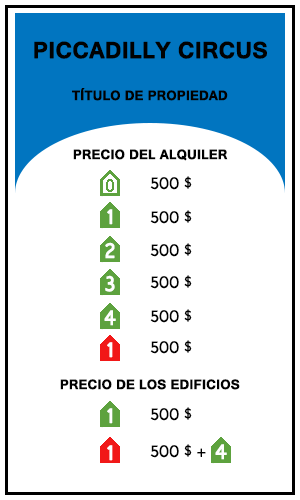
<style>
.page{position:relative;width:300px;height:500px;background:#ffffff}
.page>*{position:absolute;margin:0}
.t1{font:24px "Gautami-Bold";color:#010101;font-weight:bold}
.t2{font:14px "Gautami-Bold";color:#010101;font-weight:bold}
.t3{font:14px "KabelBook";color:#000000;font-weight:bold}
.t4{font:22px "Gautami";color:#fefefe;font-weight:bold}
</style>
<div class="page">
<p class="t1" style="left:34px;top:41px;width:233px;height:18px">PICCADILLY CIRCUS</p>
<p class="t2" style="left:72px;top:88px;width:156px;height:13px">TÍTULO DE PROPIEDAD</p>
<p class="t2" style="left:73px;top:149px;width:155px;height:12px">PRECIO DEL ALQUILER</p>
<p class="t3" style="left:150px;top:176px;width:42px;height:14px">500 $</p>
<p class="t4" style="left:107px;top:209px;width:6px;height:16px">1</p>
<p class="t3" style="left:150px;top:210px;width:42px;height:14px">500 $</p>
<p class="t4" style="left:105px;top:242px;width:10px;height:17px">2</p>
<p class="t3" style="left:150px;top:243px;width:42px;height:14px">500 $</p>
<p class="t4" style="left:105px;top:275px;width:10px;height:17px">3</p>
<p class="t3" style="left:150px;top:275px;width:42px;height:14px">500 $</p>
<p class="t4" style="left:104px;top:310px;width:12px;height:16px">4</p>
<p class="t3" style="left:150px;top:309px;width:42px;height:14px">500 $</p>
<p class="t4" style="left:107px;top:342px;width:6px;height:16px">1</p>
<p class="t3" style="left:150px;top:340px;width:42px;height:14px">500 $</p>
<p class="t2" style="left:60px;top:379px;width:180px;height:11px">PRECIO DE LOS EDIFICIOS</p>
<p class="t4" style="left:107px;top:408px;width:6px;height:16px">1</p>
<p class="t3" style="left:150px;top:407px;width:42px;height:14px">500 $</p>
<p class="t4" style="left:107px;top:445px;width:6px;height:16px">1</p>
<p class="t3" style="left:150px;top:444px;width:56px;height:14px">500 $ +</p>
<p class="t4" style="left:215px;top:444px;width:12px;height:16px">4</p>
</div>
